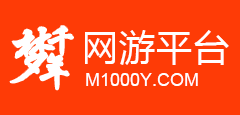
<style>
.page{position:relative;width:240px;height:115px;background:#fe3b06}
.page>*{position:absolute;margin:0}
.t1{font:36px "MicrosoftYaHei";letter-spacing:0.025em;color:#fffefe}
.t2{font:18px "ArialMT";color:#fffefe}
</style>
<div class="page">
<p class="t1" style="left:85px;top:30px;width:144px;height:35px">网游平台</p>
<p class="t2" style="left:86px;top:73px;width:112px;height:13px">M1000Y.COM</p>
</div>
